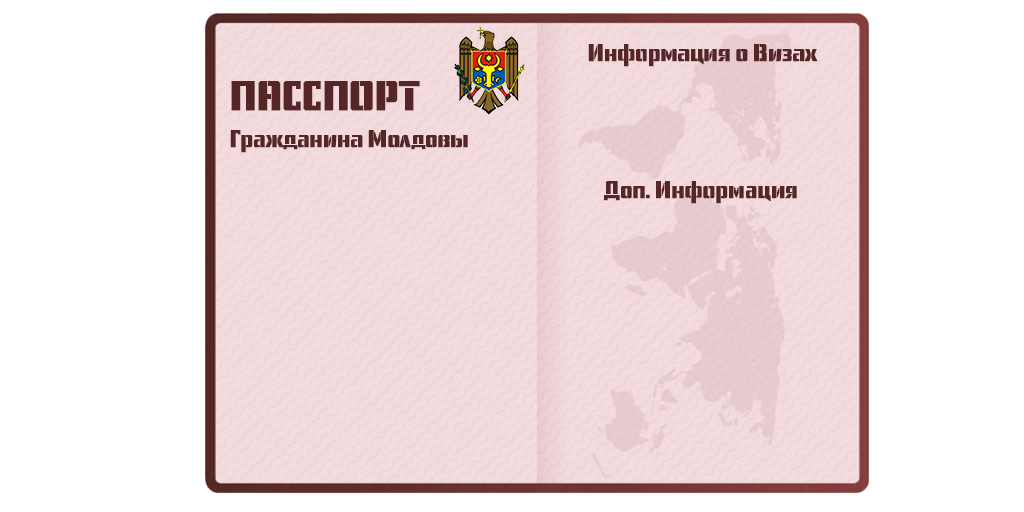
<style>
.page{position:relative;width:1024px;height:512px;background:#ffffff}
.page>*{position:absolute;margin:0}
.t1{font:24px "USSR-STENCIL";letter-spacing:-0.04em;color:#562626;font-weight:bold;scale:0.95 1}
.t2{font:24px/37.8px "USSR-STENCIL";letter-spacing:-0.04em;color:#562626;font-weight:bold;scale:0.95 1}
.t3{font:24px/49.8px "USSR-STENCIL";letter-spacing:-0.04em;color:#562626;font-weight:bold;scale:0.95 1}
.t4{font:42px/49.8px "USSR-STENCIL";letter-spacing:-0.04em;color:#562626;font-weight:bold;scale:0.95 1}
</style>
<div class="page">
<p class="t1" style="left:588px;top:44px;width:230px;height:23px">Информация о Визах</p>
<p class="t2" style="left:230px;top:81px;width:238px;height:72px"><span class="t3"><br></span><span class="t4">ПАССПОРТ<br></span>Гражданина Молдовы</p>
<p class="t1" style="left:604px;top:181px;width:193px;height:23px">Доп. Информация</p>
</div>
